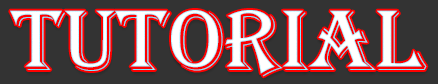
<style>
.page{position:relative;width:438px;height:84px;background:#333333}
.page>*{position:absolute;margin:0}
.t1{font:88.9px "Algerian";color:#ffffff}
</style>
<div class="page">
<p class="t1" style="left:10px;top:10px;width:417px;height:67px">TUTORIAL</p>
</div>
